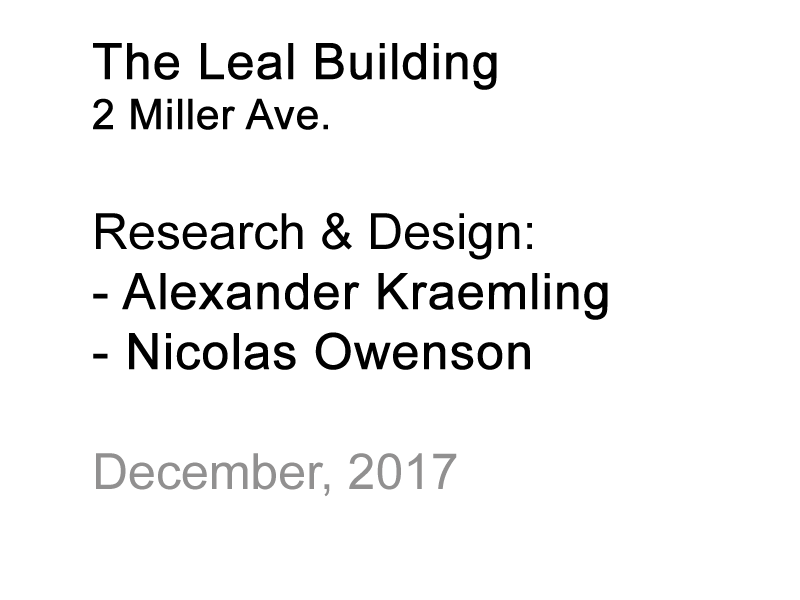
<style>
.page{position:relative;width:800px;height:600px;background:#ffffff}
.page>*{position:absolute;margin:0}
.t1{font:50px "ArialMT";color:#000000;font-weight:bold}
.t2{font:41.7px "ArialMT";color:#000000;font-weight:bold}
.t3{font:50px "ArialMT";color:#000000}
.t4{font:50px "ArialMT";color:#919090}
</style>
<div class="page">
<p class="t1" style="left:93px;top:43px;width:515px;height:454px">The Leal Building<br><span class="t2">2 Miller Ave.<br></span><span class="t3"><br>Research &amp; Design:<br></span>- Alexander Kraemling<br>- Nicolas Owenson<br><br><span class="t4">December, 2017</span></p>
</div>
